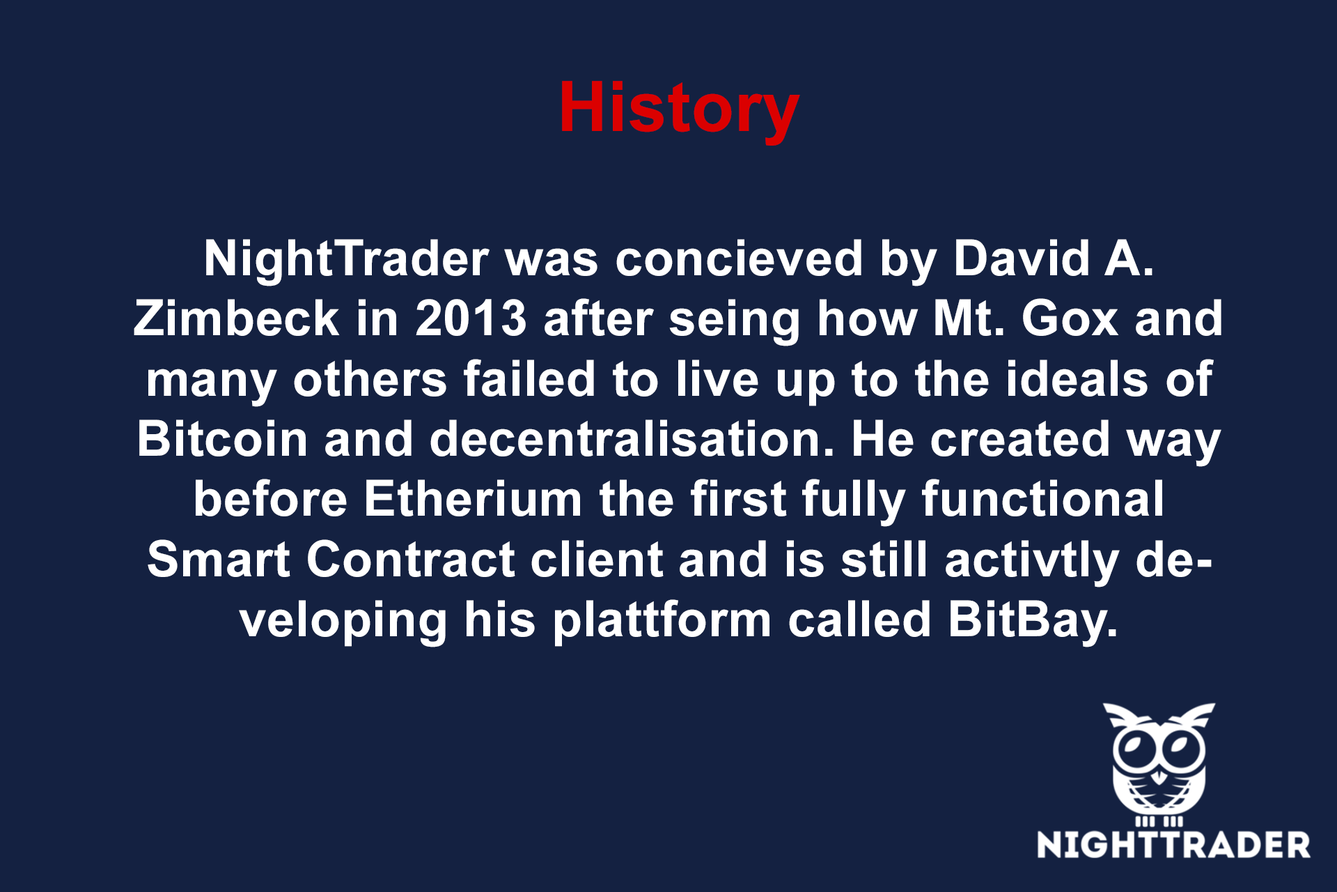
<style>
.page{position:relative;width:1337px;height:892px;background:#142141}
.page>*{position:absolute;margin:0}
.t1{font:50.2px "Arial-BoldMT";letter-spacing:0.01em;color:#ffffff}
.t2{font:69.7px "Arial-BoldMT";letter-spacing:0.01em;color:#db0000}
</style>
<div class="page">
<p class="t1" style="left:134px;top:81px;width:1088px;height:566px;text-align:center"><span class="t2">History<br><br></span>NightTrader was concieved by David A. Zimbeck in 2013 after seing how Mt. Gox and many others failed to live up to the ideals of Bitcoin and decentralisation. He created way before Etherium the first fully functional Smart Contract client and is still activtly developing his plattform called BitBay.</p>
</div>
